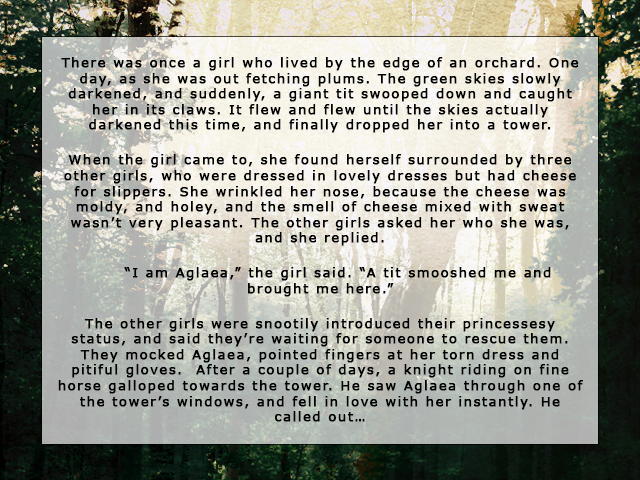
<style>
.page{position:relative;width:640px;height:480px}
.page>*{position:absolute;margin:0}
.t1{font:13px "Verdana";letter-spacing:0.1em;color:#000000;font-weight:bold}
</style>
<div class="page">
<p class="t1" style="left:58px;top:57px;width:525px;height:365px;text-align:center">There was once a girl who lived by the edge of an orchard. One day, as she was out fetching plums. The green skies slowly darkened, and suddenly, a giant tit swooped down and caught her in its claws. It flew and flew until the skies actually darkened this time, and finally dropped her into a tower. <br><br>When the girl came to, she found herself surrounded by three other girls, who were dressed in lovely dresses but had cheese for slippers. She wrinkled her nose, because the cheese was moldy, and holey, and the smell of cheese mixed with sweat wasn’t very pleasant. The other girls asked her who she was, and she replied. <br><br> “I am Aglaea,” the girl said. “A tit smooshed me and brought me here.”<br> <br>The other girls were snootily introduced their princessesy status, and said they’re waiting for someone to rescue them. They mocked Aglaea, pointed fingers at her torn dress and pitiful gloves.  After a couple of days, a knight riding on fine horse galloped towards the tower. He saw Aglaea through one of the tower’s windows, and fell in love with her instantly. He called out…</p>
</div>
